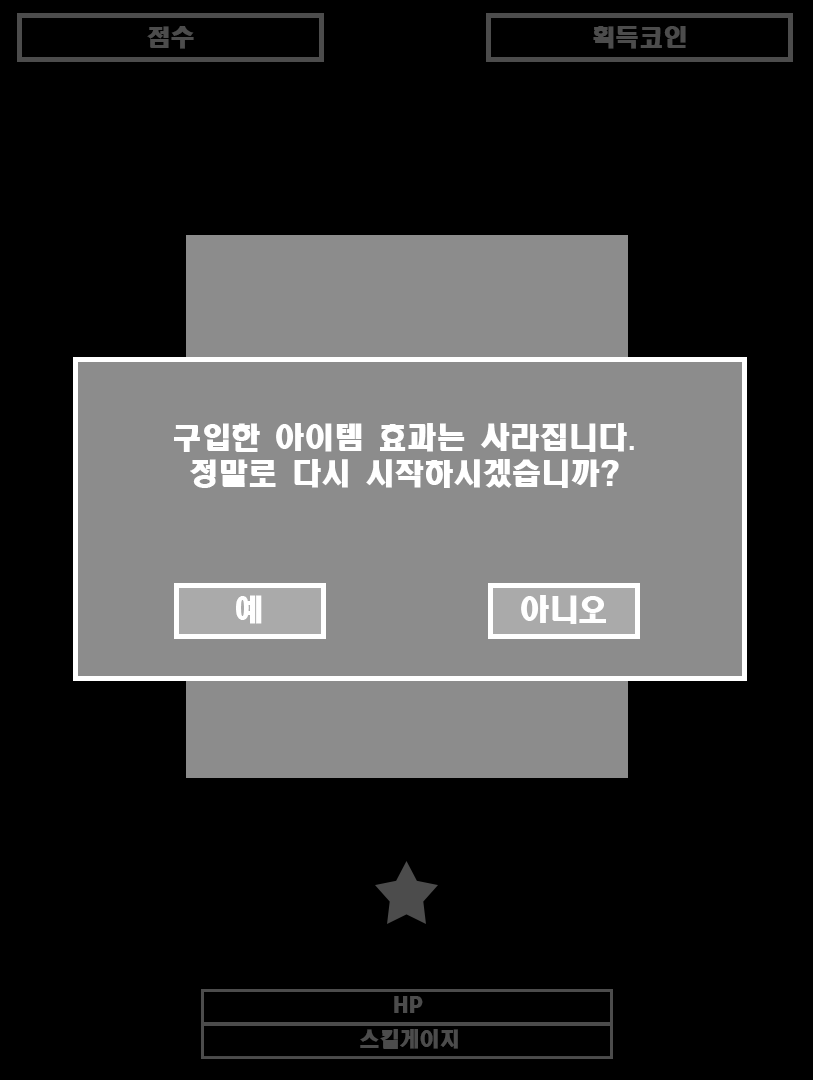
<style>
.page{position:relative;width:813px;height:1080px;background:#000000}
.page>*{position:absolute;margin:0}
.t1{font:24px "HeadlineR-HM";color:#4c4c4c}
.t2{font:29.3px "HeadlineR-HM";color:#ffffff}
.t3{font:20px "HeadlineR-HM";color:#4c4c4c}
</style>
<div class="page">
<p class="t1" style="left:147px;top:26px;width:47px;height:23px">점수</p>
<p class="t1" style="left:593px;top:26px;width:93px;height:23px">획득코인</p>
<p class="t2" style="left:174px;top:423px;width:460px;height:65px;text-align:center">구입한 아이템 효과는 사라집니다.<br>정말로 다시 시작하시겠습니까?</p>
<p class="t2" style="left:236px;top:595px;width:26px;height:29px">예</p>
<p class="t2" style="left:521px;top:595px;width:85px;height:29px">아니오</p>
<p class="t3" style="left:394px;top:996px;width:29px;height:17px">HP</p>
<p class="t3" style="left:360px;top:1029px;width:98px;height:20px">스킬게이지</p>
</div>
